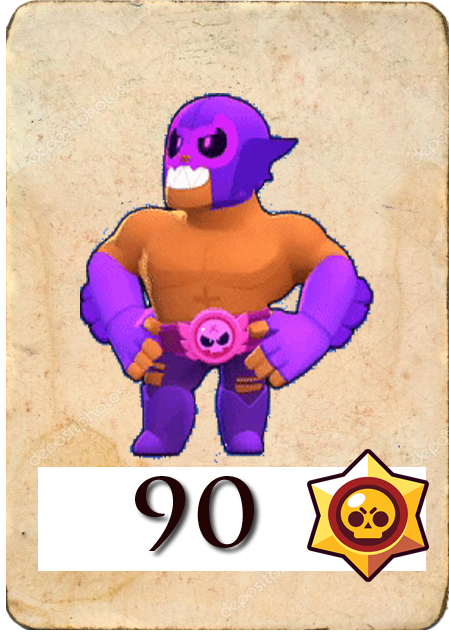
<style>
.page{position:relative;width:449px;height:635px}
.page>*{position:absolute;margin:0}
.t1{font:100px "CharlemagneStd-Bold";color:#210303}
</style>
<div class="page">
<p class="t1" style="left:135px;top:476px;width:119px;height:75px">90</p>
</div>
